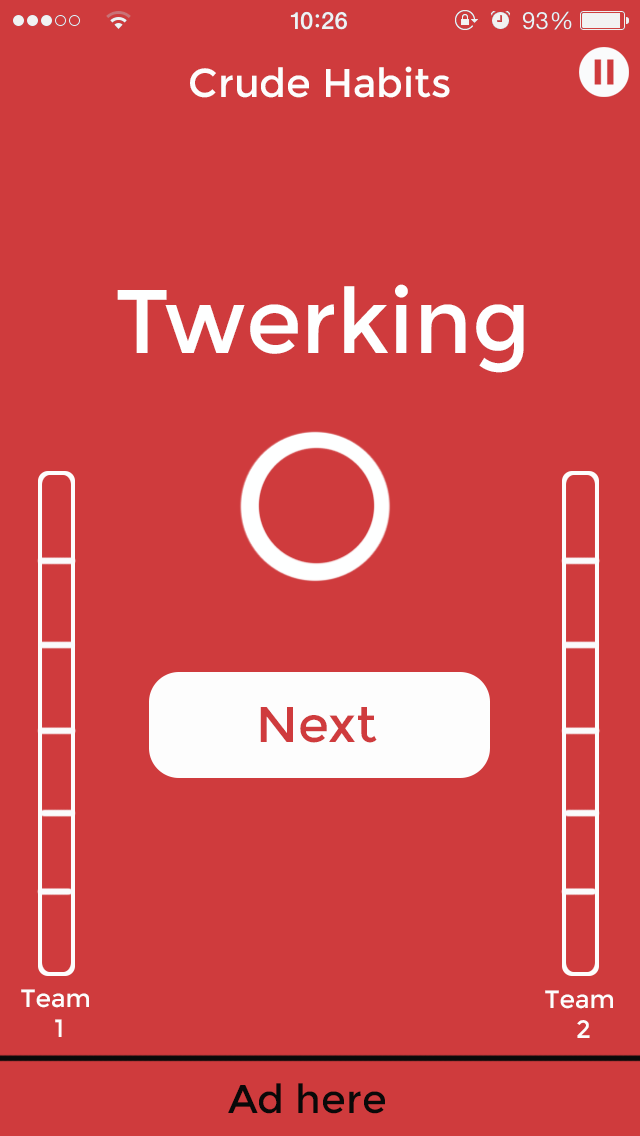
<style>
.page{position:relative;width:640px;height:1136px;background:#cf3b3d}
.page>*{position:absolute;margin:0}
.t1{font:40px "Montserrat-Regular";color:#fdfdfd}
.t2{font:90px "Montserrat-Regular";color:#feffff}
.t3{font:50px "Montserrat-Regular";color:#cf3b3d}
.t4{font:25px "Montserrat-Regular";color:#fdfdfd}
.t5{font:40px "Montserrat-Regular";color:#090909}
</style>
<div class="page">
<p class="t1" style="left:190px;top:66px;width:260px;height:32px">Crude Habits</p>
<p class="t2" style="left:117px;top:284px;width:407px;height:89px">Twerking</p>
<p class="t3" style="left:260px;top:707px;width:117px;height:36px">Next</p>
<p class="t4" style="left:21px;top:989px;width:68px;height:48px;text-align:center">Team <br>1</p>
<p class="t4" style="left:545px;top:990px;width:68px;height:48px;text-align:center">Team <br>2</p>
<p class="t5" style="left:228px;top:1083px;width:157px;height:31px">Ad here</p>
</div>
